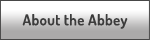
<style>
.page{position:relative;width:150px;height:40px;background:#ffffff}
.page>*{position:absolute;margin:0}
.t1{font:15px "TerminalDosis-SemiBold";letter-spacing:0.025em;color:#3c3c3c}
</style>
<div class="page">
<p class="t1" style="left:22px;top:14px;width:106px;height:15px">About the Abbey</p>
</div>
